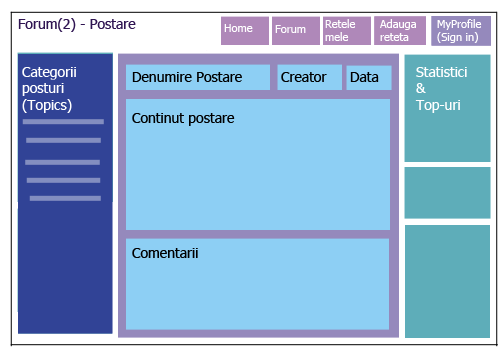
<style>
.page{position:relative;width:504px;height:360px;background:#8dcff4}
.page>*{position:absolute;margin:0}
.t1{font:14px "Tahoma";color:#2f1452}
.t2{font:11px "Tahoma";color:#ffffff}
.t3{font:14px "Tahoma";color:#ffffff}
.t4{font:14px "Tahoma";color:#000000}
</style>
<div class="page">
<p class="t1" style="left:18px;top:18px;width:118px;height:14px">Forum(2) - Postare</p>
<p class="t2" style="left:224px;top:24px;width:29px;height:8px">Home</p>
<p class="t2" style="left:275px;top:25px;width:31px;height:8px">Forum</p>
<p class="t2" style="left:325px;top:19px;width:31px;height:22px">Retele<br>mele</p>
<p class="t2" style="left:380px;top:19px;width:36px;height:22px">Adauga<br>reteta</p>
<p class="t2" style="left:437px;top:19px;width:45px;height:24px">MyProfile<br>(Sign in)</p>
<p class="t3" style="left:22px;top:67px;width:54px;height:46px">Categorii<br>posturi<br>(Topics)</p>
<p class="t4" style="left:132px;top:72px;width:110px;height:10px">Denumire Postare</p>
<p class="t4" style="left:281px;top:72px;width:46px;height:10px">Creator</p>
<p class="t4" style="left:350px;top:72px;width:29px;height:10px">Data</p>
<p class="t3" style="left:415px;top:67px;width:52px;height:46px">Statistici<br>&amp;<br>Top-uri</p>
<p class="t4" style="left:132px;top:113px;width:103px;height:13px">Continut postare</p>
<p class="t4" style="left:132px;top:248px;width:66px;height:10px">Comentarii</p>
</div>
